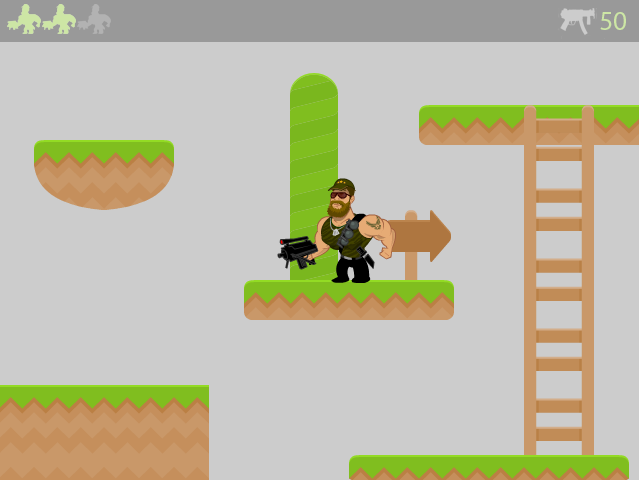
<style>
.page{position:relative;width:639px;height:480px;background:#cccccc}
.page>*{position:absolute;margin:0}
.t1{font:26.7px "MyriadPro-Regular";color:#cde6a5}
</style>
<div class="page">
<p class="t1" style="left:600px;top:12px;width:26px;height:18px">50</p>
</div>
